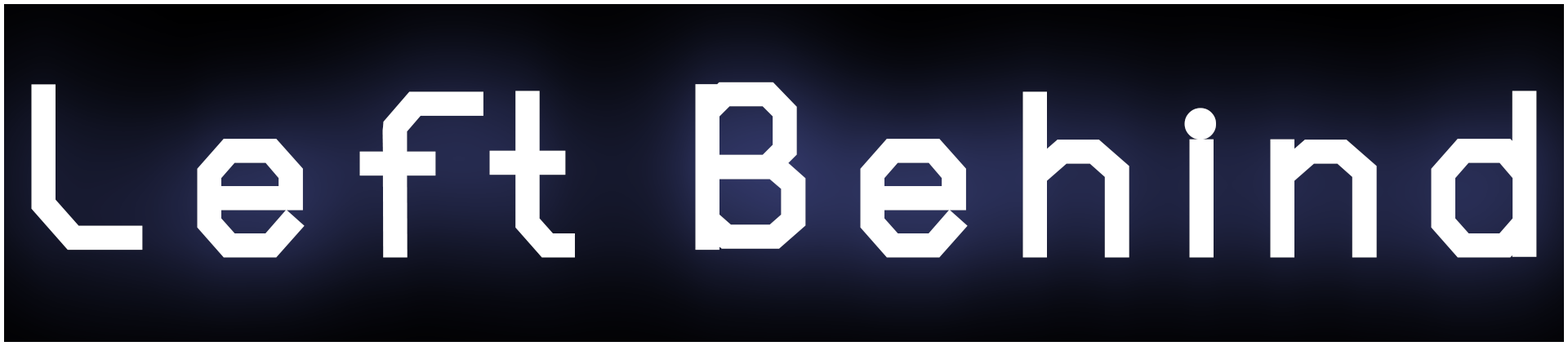
<style>
.page{position:relative;width:1568px;height:346px}
.page>*{position:absolute;margin:0}
.t1{font:272.2px "WARINGTONSDEMOBold";letter-spacing:0.12em;color:#ffffff}
</style>
<div class="page">
<p class="t1" style="left:31px;top:82px;width:1506px;height:176px">Left Behind</p>
</div>
